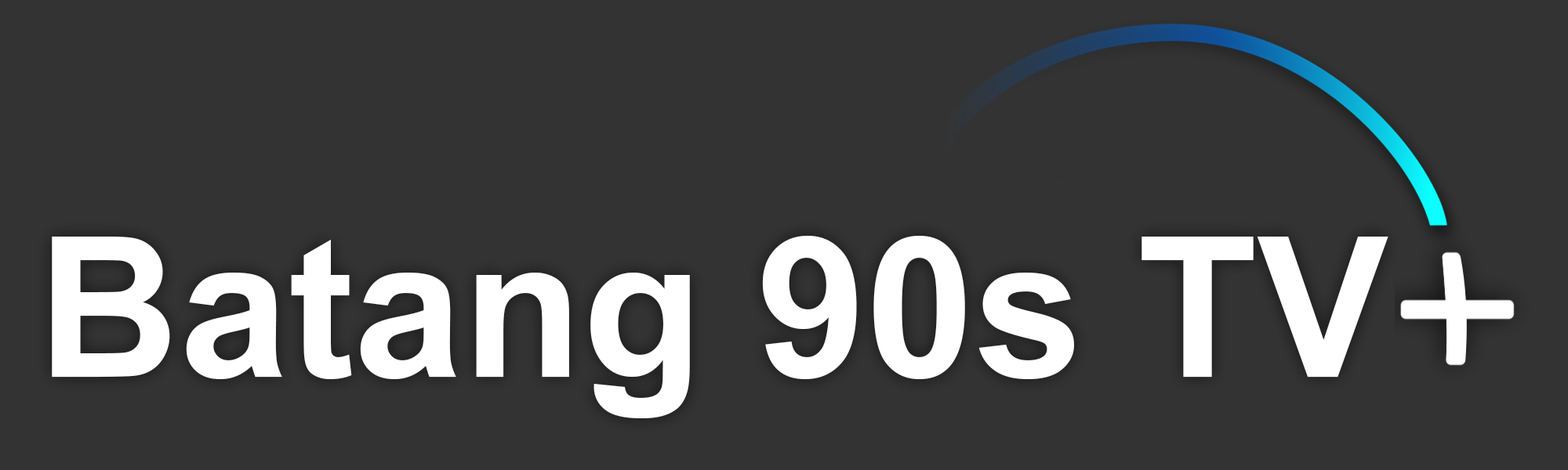
<style>
.page{position:relative;width:1568px;height:470px;background:#333333}
.page>*{position:absolute;margin:0}
.t1{font:196px "Arial-BoldMT";color:#ffffff}
</style>
<div class="page">
<p class="t1" style="left:52px;top:236px;width:1336px;height:183px">Batang 90s TV</p>
</div>
